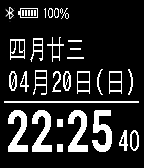
<style>
.page{position:relative;width:144px;height:168px;background:#000000}
.page>*{position:absolute;margin:0}
.t1{font:16.8px "KhmerMN";color:#ffffff;scale:0.71 1}
.t2{font:28px "AdobeHeitiStd-Regular";color:#ffffff;scale:0.71 1}
.t3{font:29.4px "IPAGothic";color:#ffffff;scale:0.71 1}
.t4{font:58.8px "Roboto-Bold";color:#ffffff;scale:0.71 1}
.t5{font:29.4px "Roboto-Condensed";color:#ffffff;scale:0.71 1}
</style>
<div class="page">
<p class="t1" style="left:44px;top:8px;width:25px;height:11px">100%</p>
<p class="t2" style="left:10px;top:37px;width:74px;height:25px">四月廿三</p>
<p class="t3" style="left:9px;top:69px;width:124px;height:26px">04月20日(日)</p>
<p class="t4" style="left:8px;top:110px;width:104px;height:42px">22:25</p>
<p class="t5" style="left:119px;top:130px;width:20px;height:21px">40</p>
</div>
